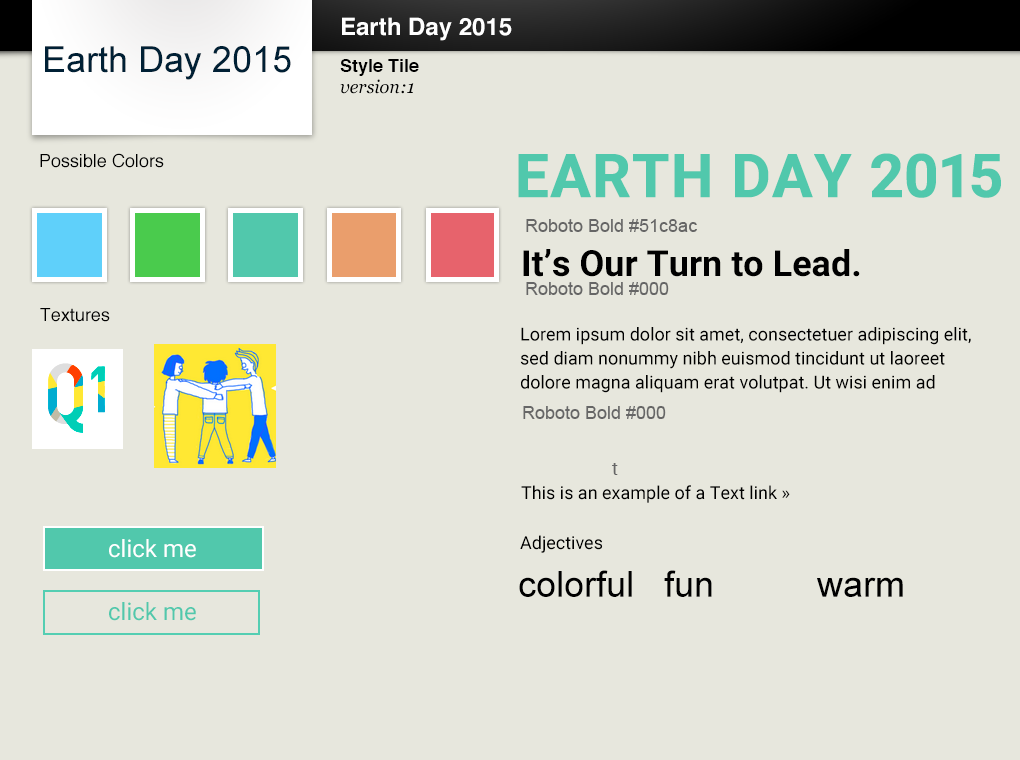
<style>
.page{position:relative;width:1020px;height:760px;background:#e7e7dd}
.page>*{position:absolute;margin:0}
.t1{font:24px "Helvetica-Bold";color:#ffffff}
.t2{font:36px "ArialMT";color:#002035}
.t3{font:18px "Helvetica-Bold";color:#000000}
.t4{font:18px "Georgia-Italic";color:#000000}
.t5{font:18px "Helvetica";color:#000000}
.t6{font:60px "Roboto-Bold";color:#51c8ac;font-weight:bold}
.t7{font:18px "ArialMT";color:#666666}
.t8{font:36px "Roboto-Bold";color:#000000}
.t9{font:18px/24px "Roboto-Regular";color:#000000}
.t10{font:18px "Roboto-Regular";color:#666666}
.t11{font:18px "Roboto-Regular";color:#000000}
.t12{font:24px "Roboto-Regular";color:#ffffff}
.t13{font:36px "ArialMT";color:#000000}
.t14{font:24px "Roboto-Regular";color:#51c8ac}
</style>
<div class="page">
<p class="t1" style="left:342px;top:17px;width:170px;height:24px">Earth Day 2015</p>
<p class="t2" style="left:45px;top:46px;width:246px;height:34px">Earth Day 2015</p>
<p class="t3" style="left:340px;top:59px;width:79px;height:17px">Style Tile</p>
<p class="t4" style="left:340px;top:79px;width:74px;height:15px">version:1</p>
<p class="t5" style="left:40px;top:153px;width:124px;height:15px">Possible Colors</p>
<p class="t6" style="left:518px;top:153px;width:483px;height:45px">EARTH DAY 2015</p>
<p class="t7" style="left:526px;top:219px;width:171px;height:13px">Roboto Bold #51c8ac</p>
<p class="t8" style="left:523px;top:249px;width:337px;height:28px">It’s Our Turn to Lead.</p>
<p class="t7" style="left:526px;top:282px;width:143px;height:13px">Roboto Bold #000</p>
<p class="t5" style="left:40px;top:308px;width:70px;height:14px">Textures</p>
<p class="t9" style="left:520px;top:327px;width:451px;height:66px">Lorem ipsum dolor sit amet, consectetuer adipiscing elit, sed diam nonummy nibh euismod tincidunt ut laoreet dolore magna aliquam erat volutpat. Ut wisi enim ad</p>
<p class="t7" style="left:523px;top:406px;width:143px;height:13px">Roboto Bold #000</p>
<p class="t10" style="left:612px;top:463px;width:6px;height:12px">t</p>
<p class="t11" style="left:521px;top:485px;width:269px;height:18px">This is an example of a Text link »</p>
<p class="t12" style="left:109px;top:539px;width:87px;height:19px">click me</p>
<p class="t11" style="left:520px;top:535px;width:83px;height:18px">Adjectives</p>
<p class="t13" style="left:519px;top:570px;width:113px;height:27px">colorful</p>
<p class="t13" style="left:664px;top:570px;width:48px;height:27px">fun</p>
<p class="t13" style="left:817px;top:577px;width:86px;height:20px">warm</p>
<p class="t14" style="left:109px;top:602px;width:87px;height:19px">click me</p>
</div>
